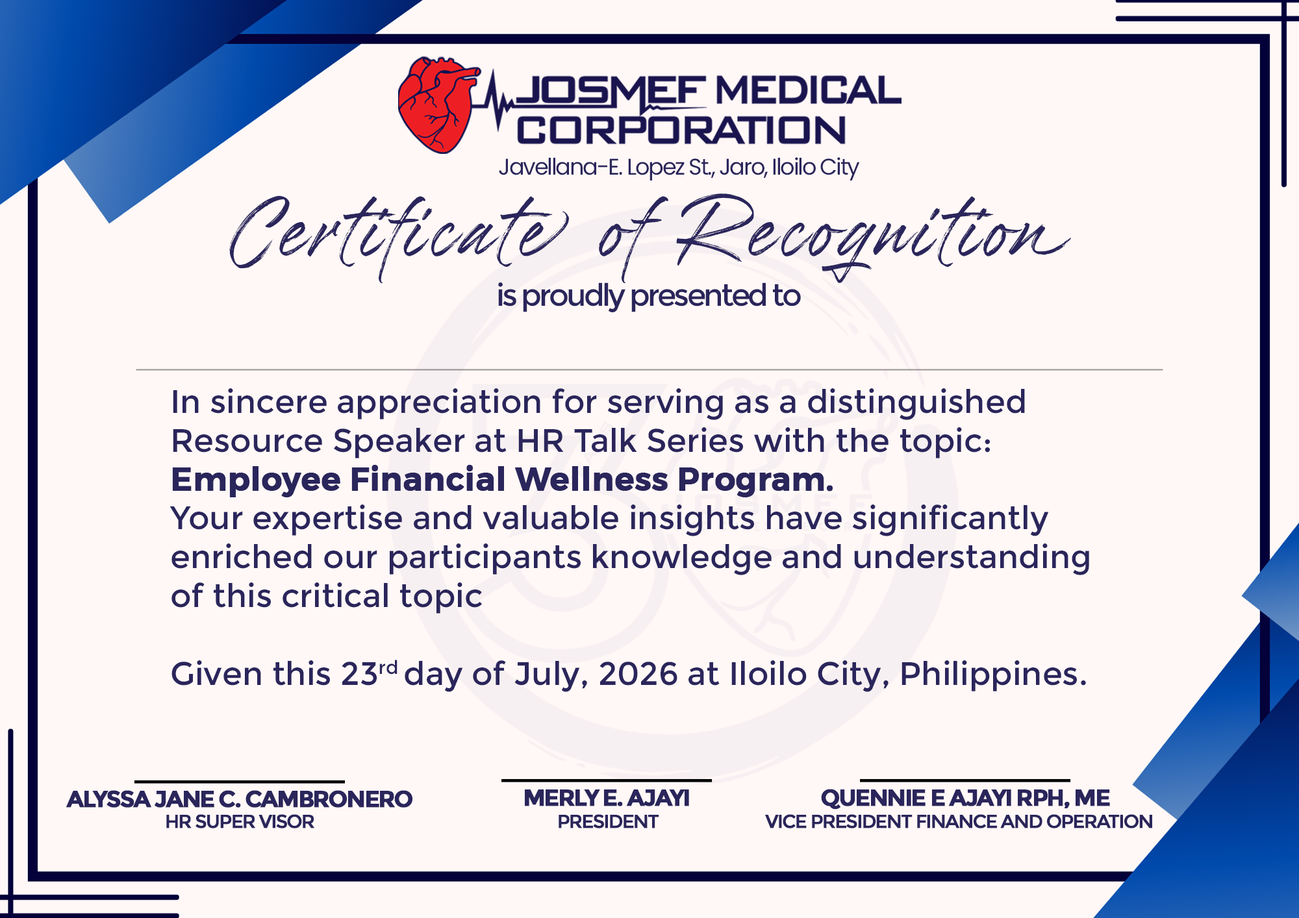
<style>
.page{position:relative;width:1299px;height:918px;background:#fff8f7}
.page>*{position:absolute;margin:0}
.t1{font:22.8px "Poppins-Regular";letter-spacing:-0.06em;color:#2a255b}
.t2{font:86.4px "Brushwell";letter-spacing:0.06em;color:#2a255b}
.t3{font:30.8px "Montserrat-Regular";letter-spacing:-0.08em;color:#2a255b}
.t4{font:32.4px "Montserrat-Regular";color:#2a255b}
.t5{font:32.4px "Montserrat-SemiBold";color:#2a255b;font-weight:bold}
.t6{font:23.3px "Montserrat-Bold";letter-spacing:-0.08em;color:#2a255b;text-transform:uppercase;font-weight:bold}
.t7{font:18.6px "Montserrat-Regular";letter-spacing:-0.08em;color:#2a255b;text-transform:uppercase;font-weight:bold}
</style>
<div class="page">
<p class="t1" style="left:499px;top:157px;width:361px;height:24px">Javellana-E. Lopez St., Jaro, Iloilo City</p>
<p class="t2" style="left:229px;top:194px;width:842px;height:90px">Certificate of Recognition</p>
<p class="t3" style="left:498px;top:282px;width:303px;height:30px">is proudly presented to</p>
<p class="t4" style="left:169px;top:388px;width:920px;height:304px">In sincere appreciation for serving as a distinguished Resource Speaker at HR Talk Series with the topic:<br><span class="t5">Employee Financial Wellness Program.<br></span>Your expertise and valuable insights have significantly enriched our participants knowledge and understanding of this critical topic<br><br>Given this 23rd day of July, 2026 at Iloilo City, Philippines.</p>
<p class="t6" style="left:66px;top:790px;width:346px;height:18px">alyssa jane c. cambronero</p>
<p class="t6" style="left:525px;top:790px;width:164px;height:16px">merly E. Ajayi</p>
<p class="t6" style="left:821px;top:789px;width:289px;height:21px">Quennie E Ajayi rph, me</p>
<p class="t7" style="left:166px;top:814px;width:148px;height:15px">hr super visor</p>
<p class="t7" style="left:558px;top:814px;width:101px;height:15px">President</p>
<p class="t7" style="left:765px;top:814px;width:387px;height:15px">vice president finance and operation</p>
</div>
